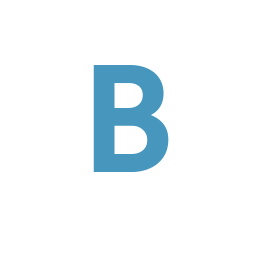
<style>
.page{position:relative;width:256px;height:256px;background:#ffffff}
.page>*{position:absolute;margin:0}
.t1{font:150px "AbletonSansSmall-Bold";color:#4696bd}
</style>
<div class="page">
<p class="t1" style="left:93px;top:65px;width:76px;height:107px">B</p>
</div>
